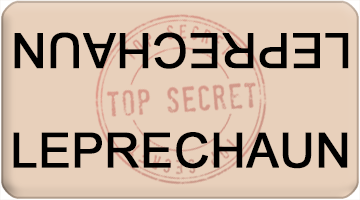
<style>
.page{position:relative;width:360px;height:200px;background:#e8d0bb}
.page>*{position:absolute;margin:0}
.t1{font:48px "ArialMT";color:#000000;font-weight:bold}
</style>
<div class="page">
<p class="t1" style="left:14px;top:32px;width:335px;height:37px;rotate:180deg">LEPRECHAUN</p>
<p class="t1" style="left:13px;top:132px;width:335px;height:37px">LEPRECHAUN</p>
</div>
